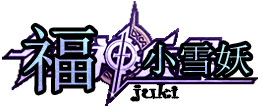
<style>
.page{position:relative;width:260px;height:107px;background:#ffffff}
.page>*{position:absolute;margin:0}
.t1{font:71.8px "SimSun";scale:1.1 1}
.t2{font:33.4px "SimSun";color:#bdf4ff;scale:1.1 1}
.t3{font:17px "CurlzMT";color:#000000;scale:1.97 1}
</style>
<div class="page">
<p class="t1" style="left:23px;top:26px;width:72px;height:66px">福</p>
<p class="t2" style="left:144px;top:44px;width:106px;height:31px">小雪妖</p>
<p class="t3" style="left:131px;top:84px;width:48px;height:17px">juki</p>
</div>
